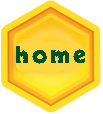
<style>
.page{position:relative;width:103px;height:114px;background:#ffffff}
.page>*{position:absolute;margin:0}
.t1{font:22px "Skranji-Bold";letter-spacing:0.15em;color:#01512b}
</style>
<div class="page">
<p class="t1" style="left:16px;top:46px;width:69px;height:18px">home</p>
</div>
